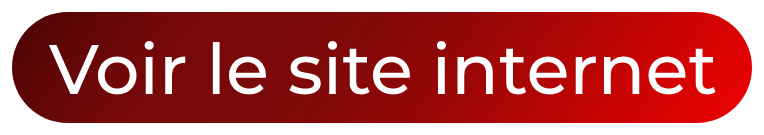
<style>
.page{position:relative;width:764px;height:135px;background:#ffffff}
.page>*{position:absolute;margin:0}
.t1{font:70px "Montserrat-Medium";color:#ffffff}
</style>
<div class="page">
<p class="t1" style="left:48px;top:41px;width:668px;height:54px">Voir le site internet</p>
</div>
